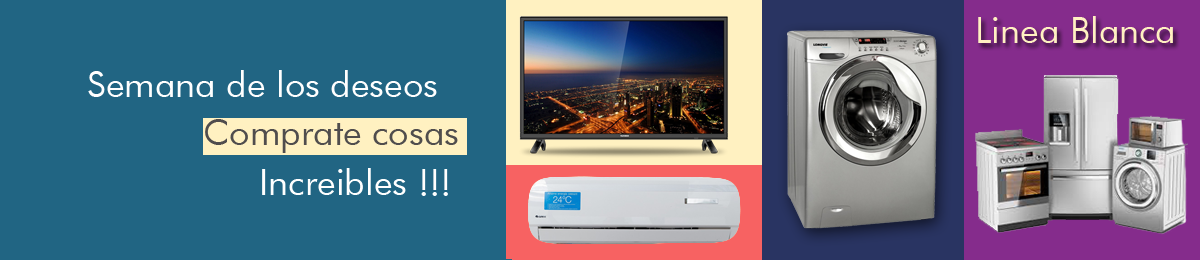
<style>
.page{position:relative;width:1200px;height:260px;background:#216583}
.page>*{position:absolute;margin:0}
.t1{font:36px "FuturaBT-Book";color:#fff1c1}
.t2{font:36px "FuturaBT-Book";color:#ffffff}
.t3{font:36px "FuturaBT-Book";color:#504d4d}
</style>
<div class="page">
<p class="t1" style="left:978px;top:16px;width:195px;height:27px">Linea Blanca</p>
<p class="t2" style="left:88px;top:70px;width:349px;height:27px">Semana de los deseos</p>
<p class="t3" style="left:205px;top:119px;width:253px;height:34px">Comprate cosas</p>
<p class="t2" style="left:262px;top:168px;width:186px;height:28px">Increibles !!!</p>
</div>
